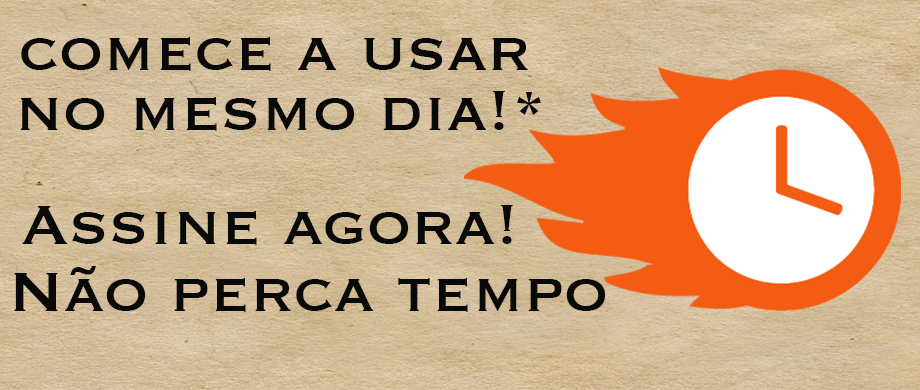
<style>
.page{position:relative;width:920px;height:390px}
.page>*{position:absolute;margin:0}
.t1{font:72px "Copperplate";color:#090909}
</style>
<div class="page">
<p class="t1" style="left:21px;top:37px;width:507px;height:34px">comece a usar</p>
<p class="t1" style="left:20px;top:91px;width:521px;height:40px">no mesmo dia!*</p>
<p class="t1" style="left:22px;top:205px;width:491px;height:40px">Assine agora!</p>
<p class="t1" style="left:14px;top:266px;width:592px;height:46px">Não perca tempo</p>
</div>
